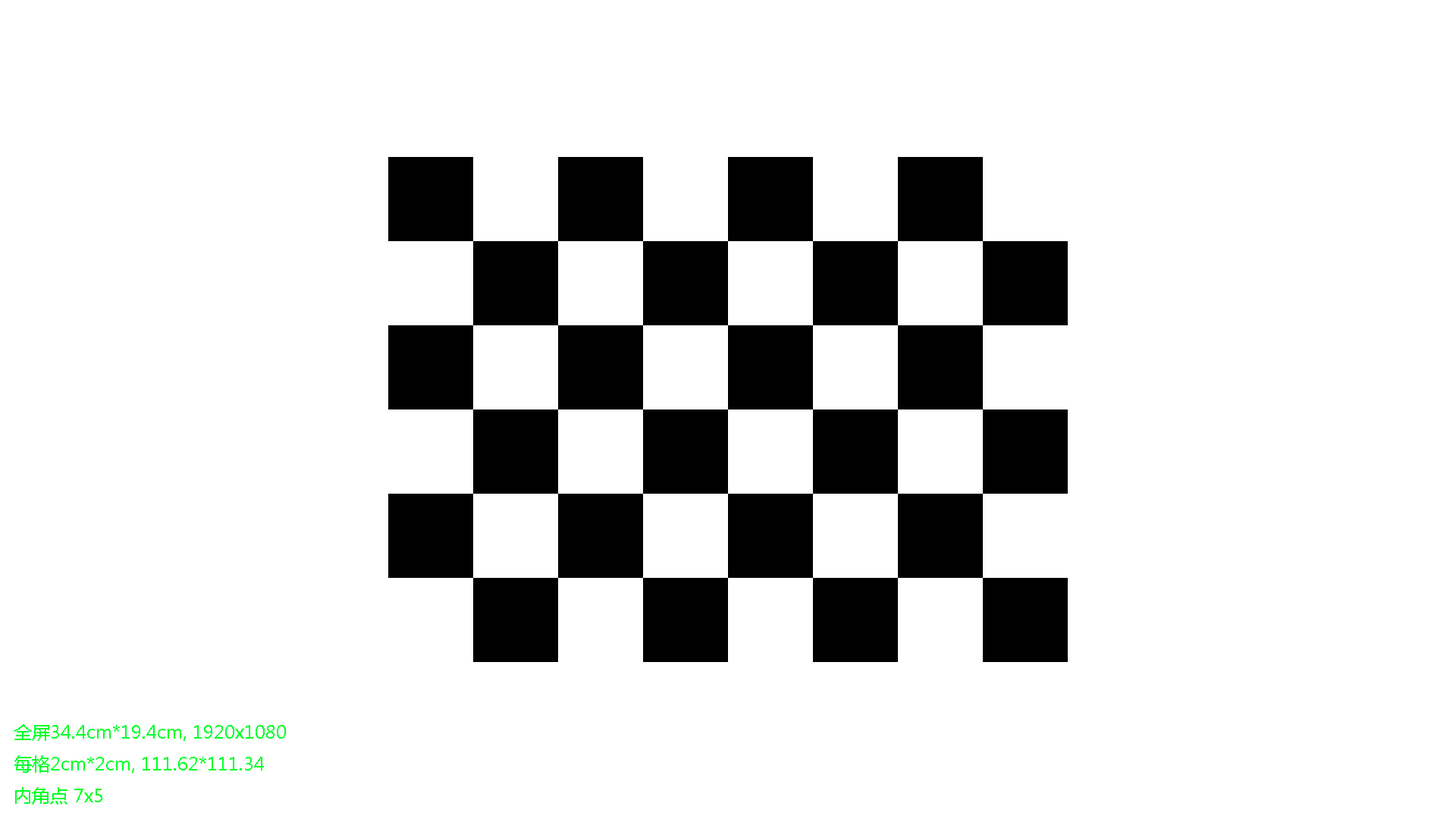
<style>
.page{position:relative;width:1456px;height:819px;background:#ffffff}
.page>*{position:absolute;margin:0}
.t1{font:18.2px "MicrosoftYaHei";color:#00ff2a}
</style>
<div class="page">
<p class="t1" style="left:14px;top:724px;width:272px;height:81px">全屏34.4cm*19.4cm, 1920x1080<br>每格2cm*2cm, 111.62*111.34<br>内角点 7x5</p>
</div>
